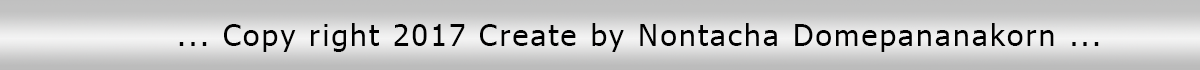
<style>
.page{position:relative;width:1200px;height:70px}
.page>*{position:absolute;margin:0}
.t1{font:30px "Tahoma";letter-spacing:0.075em;color:#000000}
</style>
<div class="page">
<p class="t1" style="left:179px;top:23px;width:920px;height:29px">... Copy right 2017 Create by Nontacha Domepananakorn ...</p>
</div>
